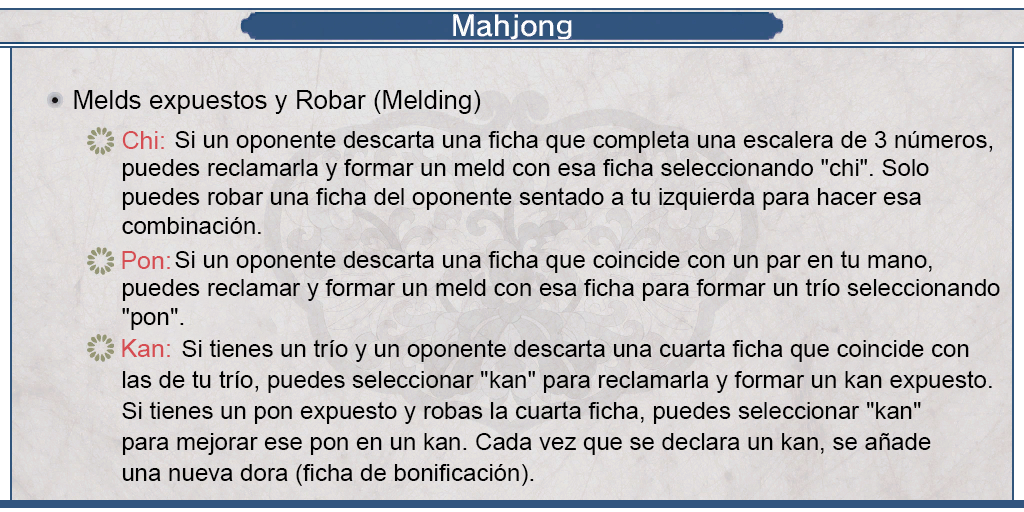
<style>
.page{position:relative;width:1024px;height:512px}
.page>*{position:absolute;margin:0}
.t1{font:26px "ArialMT";color:#000000}
.t2{font:24px "ArialMT";color:#000000}
.t3{font:24.8px "ArialMT";color:#d64d52}
.t4{font:24px/31px "ArialMT";color:#000000}
</style>
<div class="page">
<p class="t1" style="left:74px;top:90px;width:407px;height:24px">Melds expuestos y Robar (Melding)</p>
<p class="t2" style="left:122px;top:130px;width:871px;height:104px;text-align:justify">Si un oponente descarta una ficha que completa una escalera de 3 números, <br>puedes reclamarla y formar un meld con esa ficha seleccionando "chi". Solo <br>puedes robar una ficha del oponente sentado a tu izquierda para hacer esa <br>combinación.</p>
<p class="t3" style="left:122px;top:131px;width:42px;height:18px">Chi:</p>
<p class="t2" style="left:122px;top:250px;width:878px;height:80px;text-align:justify">Si un oponente descarta una ficha que coincide con un par en tu mano,<br>puedes reclamar y formar un meld con esa ficha para formar un trío seleccionando <br>"pon".</p>
<p class="t3" style="left:122px;top:251px;width:48px;height:18px">Pon:</p>
<p class="t4" style="left:122px;top:339px;width:870px;height:147px;text-align:justify">Si tienes un trío y un oponente descarta una cuarta ficha que coincide con <br>las de tu trío, puedes seleccionar "kan" para reclamarla y formar un kan expuesto.<br>Si tienes un pon expuesto y robas la cuarta ficha, puedes seleccionar "kan"<br>para mejorar ese pon en un kan. Cada vez que se declara un kan, se añade <br>una nueva dora (ficha de bonificación).</p>
<p class="t3" style="left:122px;top:339px;width:48px;height:18px">Kan:</p>
</div>
